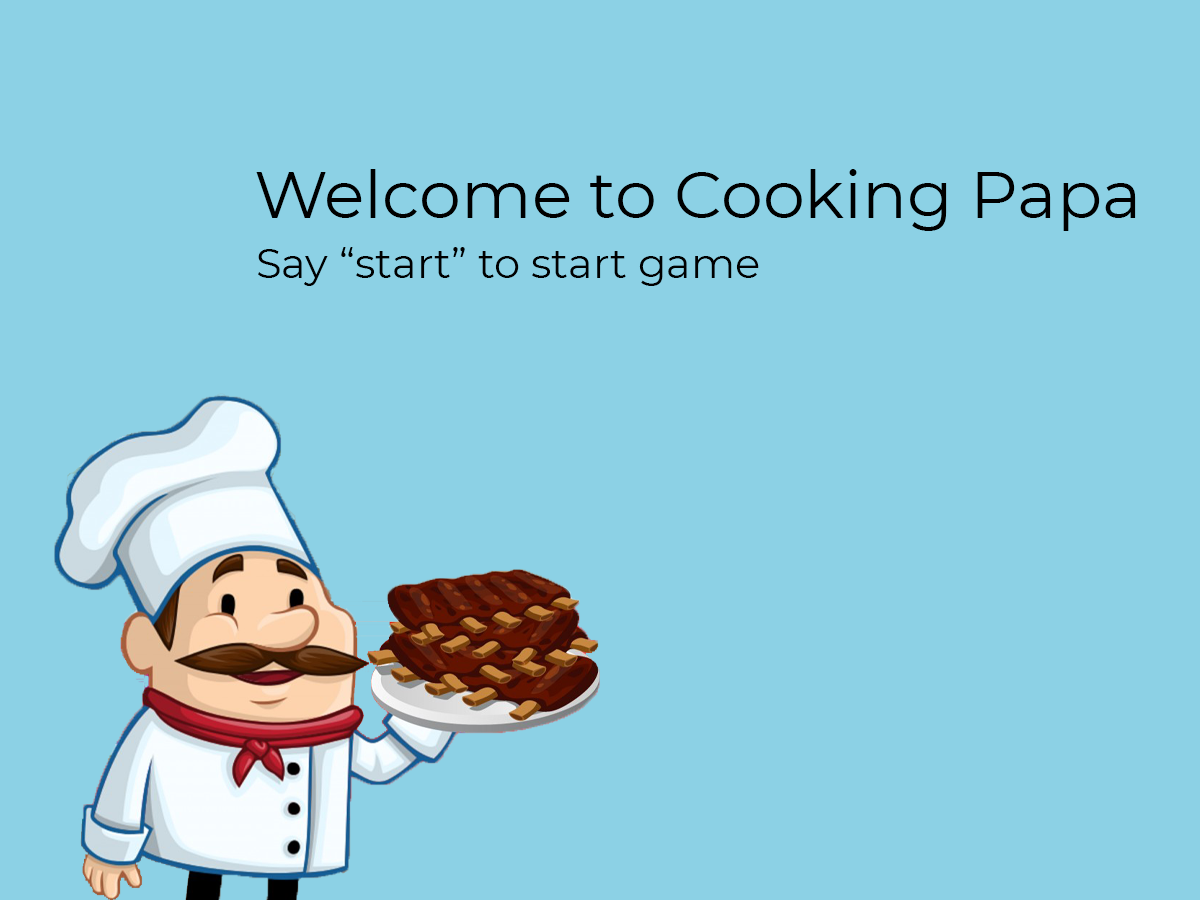
<style>
.page{position:relative;width:1200px;height:900px;background:#8cd1e5}
.page>*{position:absolute;margin:0}
.t1{font:66.7px "Montserrat-Regular";color:#000000}
.t2{font:41.7px "Montserrat-Regular";color:#000000}
</style>
<div class="page">
<p class="t1" style="left:256px;top:169px;width:880px;height:62px">Welcome to Cooking Papa</p>
<p class="t2" style="left:258px;top:247px;width:501px;height:39px">Say “start” to start game</p>
</div>
